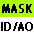
<style>
.page{position:relative;width:34px;height:34px;background:#aeff00}
.page>*{position:absolute;margin:0}
.t1{font:11.6px "TrebuchetMS";color:#000000;text-transform:uppercase;font-weight:bold;scale:0.95 1}
.t2{font:11.6px "TrebuchetMS";color:#000000;text-transform:uppercase;font-weight:bold;scale:0.93 1}
</style>
<div class="page">
<p class="t1" style="left:2px;top:4px;width:30px;height:9px">MASK</p>
<p class="t2" style="left:1px;top:22px;width:32px;height:9px">ID/AO</p>
</div>
